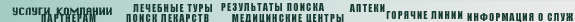
<style>
.page{position:relative;width:575px;height:22px}
.page>*{position:absolute;margin:0}
.t1{font:10px "Impact";letter-spacing:0.1em;color:#183b31}
</style>
<div class="page">
<p class="t1" style="left:133px;top:4px;width:79px;height:8px">ЛЕЧЕБНЫЕ ТУРЫ</p>
<p class="t1" style="left:221px;top:3px;width:103px;height:8px">РЕЗУЛЬТАТЫ ПОИСКА</p>
<p class="t1" style="left:349px;top:4px;width:36px;height:8px">АПТЕКИ</p>
<p class="t1" style="left:41px;top:14px;width:55px;height:8px">ПАРТНЕРАМ</p>
<p class="t1" style="left:126px;top:14px;width:83px;height:8px">ПОИСК ЛЕКАРСТВ</p>
<p class="t1" style="left:232px;top:14px;width:112px;height:10px">МЕДИЦИНСКИЕ ЦЕНТРЫ</p>
<p class="t1" style="left:386px;top:11px;width:77px;height:8px">ГОРЯЧИЕ ЛИНИИ</p>
</div>
